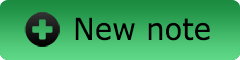
<style>
.page{position:relative;width:240px;height:60px}
.page>*{position:absolute;margin:0}
.t1{font:30px "Verdana";color:#000000;scale:0.97 1}
</style>
<div class="page">
<p class="t1" style="left:75px;top:17px;width:135px;height:24px">New note</p>
</div>
